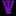
<style>
.page{position:relative;width:16px;height:16px;background:#000000}
.page>*{position:absolute;margin:0}
.t1{font:18px "Verdana";letter-spacing:0.05em;color:#7311ab;font-weight:bold}
</style>
<div class="page">
<p class="t1" style="left:2px;top:0px;width:13px;height:14px">V</p>
<p class="t1" style="left:5px;top:0px;width:7px;height:14px">I</p>
</div>
